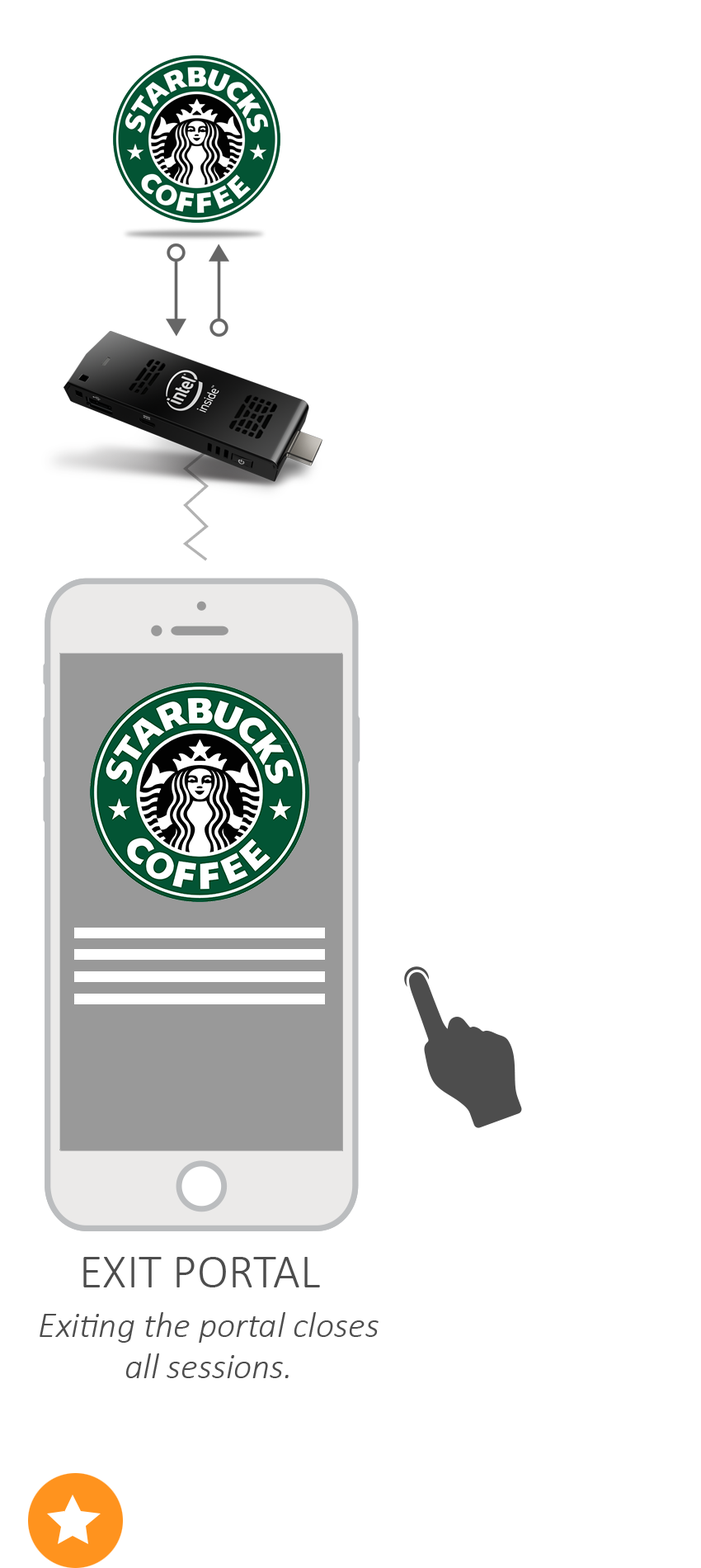
<style>
.page{position:relative;width:701px;height:1568px;background:#ffffff}
.page>*{position:absolute;margin:0}
.t1{font:82.5px "Calibri-Light";color:#4d4d4d}
.t2{font:61.9px/41.3px "Calibri-LightItalic";color:#4d4d4d}
</style>
<div class="page">
<p class="t1" style="left:83px;top:1257px;width:237px;height:30px">EXIT PORTAL</p>
<p class="t2" style="left:40px;top:1312px;width:339px;height:66px;text-align:center">Exiting the portal closes<br>all sessions.</p>
</div>
